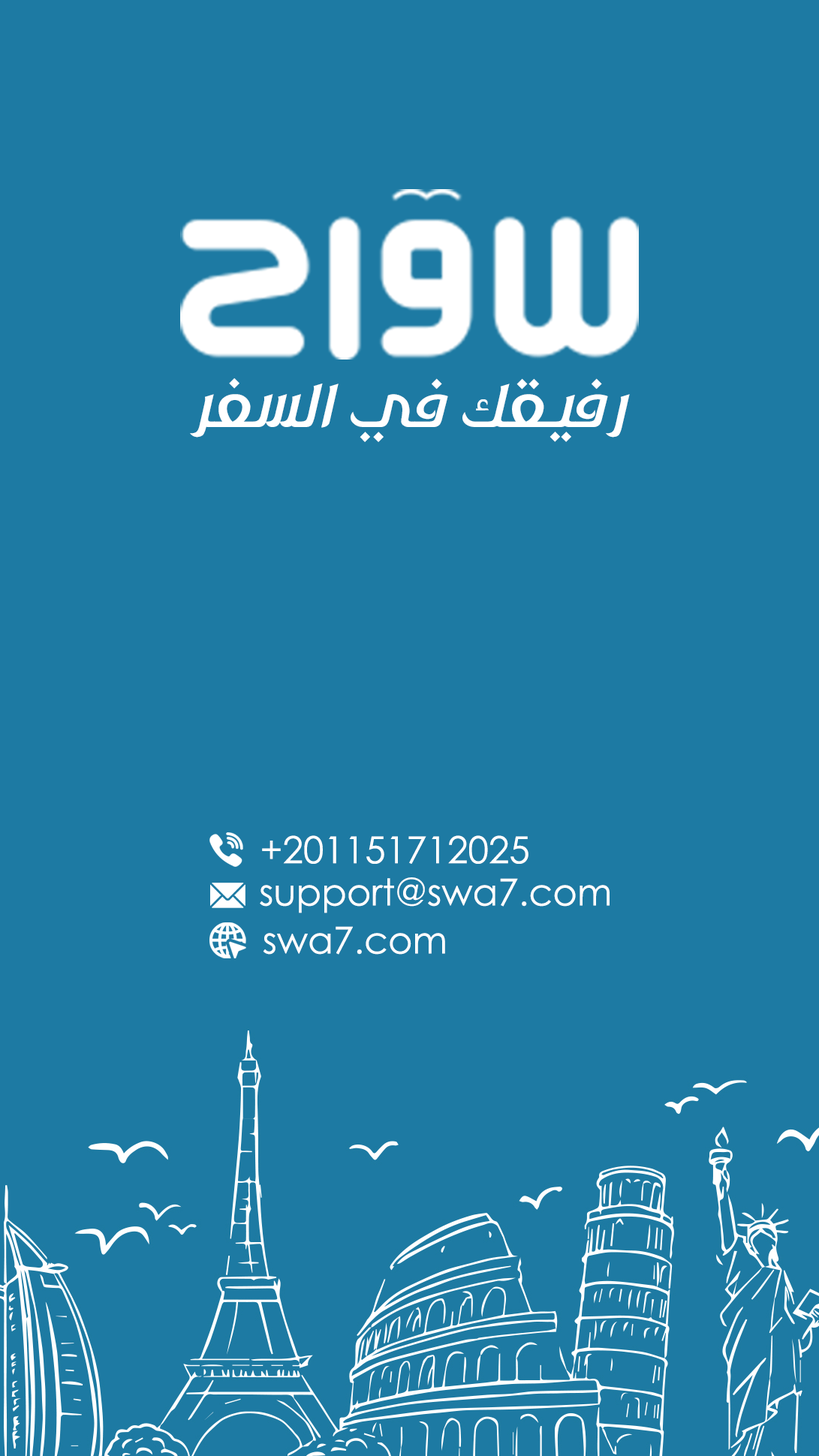
<style>
.page{position:relative;width:819px;height:1456px;background:#1d7aa3}
.page>*{position:absolute;margin:0}
.t1{font:75.1px "AraAssaf-Regular";color:#ffffff}
.t2{font:37.2px "CenturyGothic";color:#ffffff}
</style>
<div class="page">
<p class="t1" style="left:190px;top:378px;width:440px;height:64px">رفيقك في السفر</p>
<p class="t2" style="left:262px;top:835px;width:266px;height:29px">+201151712025</p>
<p class="t2" style="left:260px;top:877px;width:349px;height:36px">support@swa7.com</p>
<p class="t2" style="left:263px;top:926px;width:182px;height:29px">swa7.com</p>
</div>
